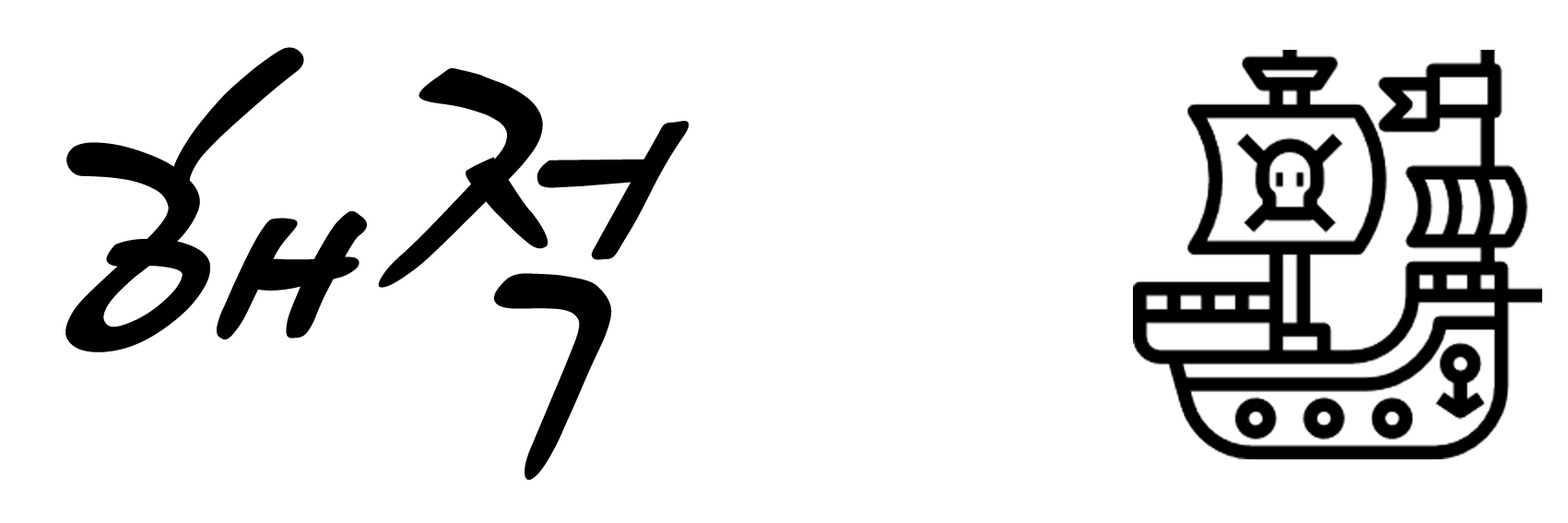
<style>
.page{position:relative;width:1568px;height:523px;background:#ffffff}
.page>*{position:absolute;margin:0}
.t1{font:503.5px "HaanCjaB";color:#000000}
</style>
<div class="page">
<p class="t1" style="left:65px;top:47px;width:624px;height:433px">해적</p>
</div>
